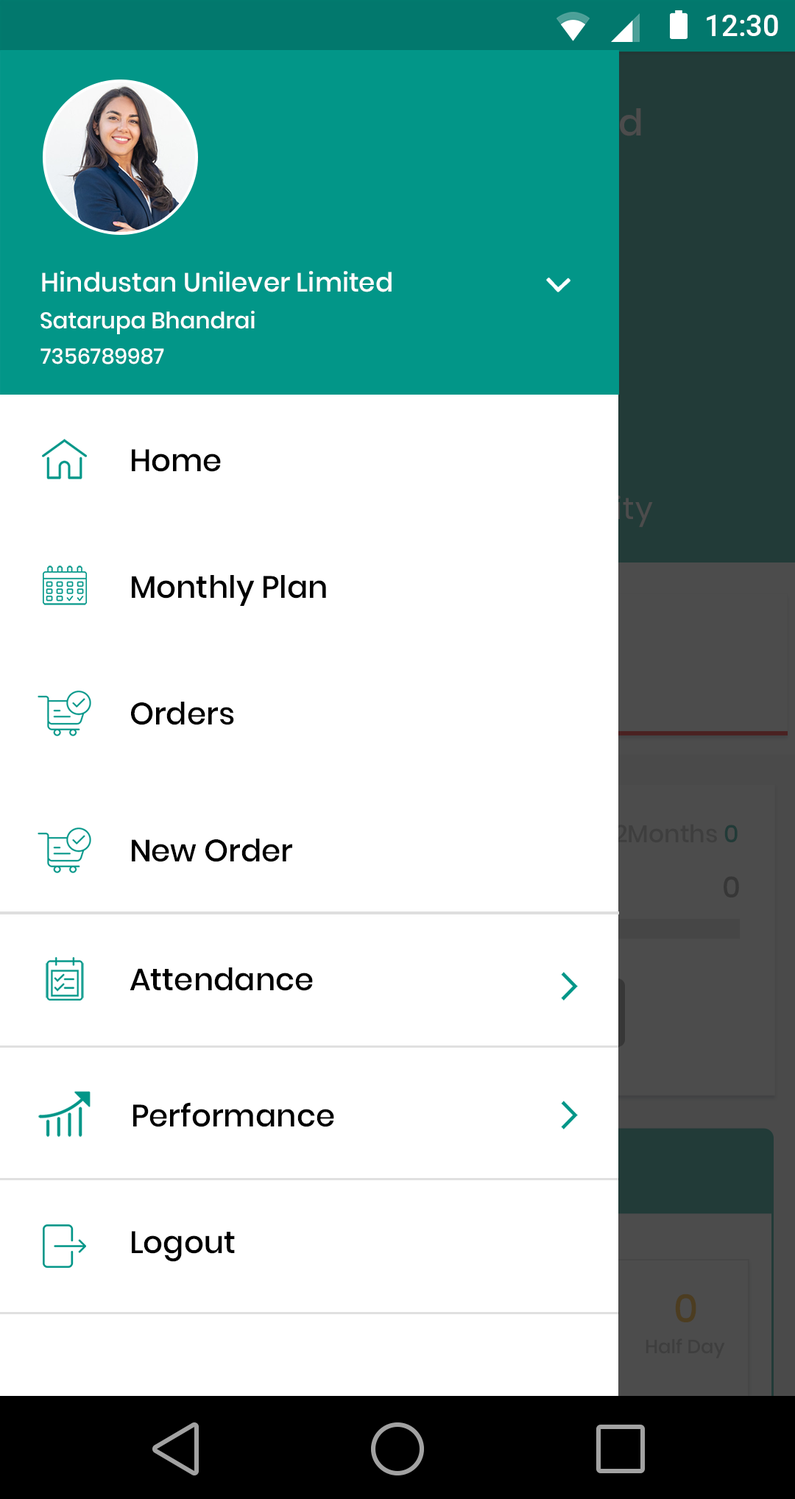
<style>
.page{position:relative;width:795px;height:1499px;background:#ffffff}
.page>*{position:absolute;margin:0}
.t1{font:26.4px "Poppins-Medium";color:#ffffff}
.t2{font:22.6px "Poppins-Medium";color:#ffffff}
.t3{font:21.2px "Poppins-Medium";color:#ffffff}
.t4{font:30.9px "Poppins-Medium";color:#000000}
</style>
<div class="page">
<p class="t1" style="left:42px;top:271px;width:350px;height:21px">Hindustan Unilever Limited</p>
<p class="t2" style="left:41px;top:311px;width:214px;height:23px">Satarupa Bhandrai</p>
<p class="t3" style="left:41px;top:348px;width:123px;height:17px">7356789987</p>
<p class="t4" style="left:132px;top:449px;width:89px;height:23px">Home</p>
<p class="t4" style="left:132px;top:575px;width:194px;height:31px">Monthly Plan</p>
<p class="t4" style="left:131px;top:702px;width:103px;height:23px">Orders</p>
<p class="t4" style="left:132px;top:839px;width:160px;height:23px">New Order</p>
<p class="t4" style="left:130px;top:968px;width:183px;height:23px">Attendance</p>
<p class="t4" style="left:133px;top:1102px;width:201px;height:25px">Performance</p>
<p class="t4" style="left:132px;top:1231px;width:103px;height:31px">Logout</p>
</div>
